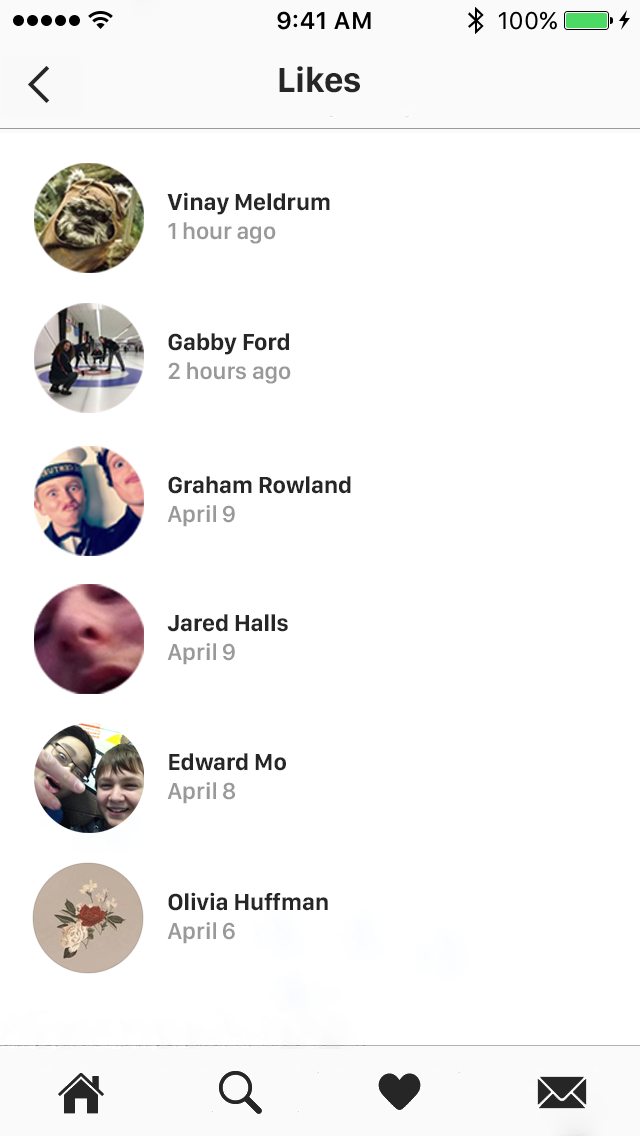
<style>
.page{position:relative;width:640px;height:1136px;background:#ffffff}
.page>*{position:absolute;margin:0}
.t1{font:36px "SanFranciscoDisplay-Bold";color:#262626}
.t2{font:24px "SanFranciscoDisplay-Bold";color:#262626}
.t3{font:24px "SanFranciscoDisplay-Semibold";color:#999999}
</style>
<div class="page">
<p class="t1" style="left:279px;top:66px;width:81px;height:27px">Likes</p>
<p class="t2" style="left:167px;top:192px;width:163px;height:52px">Vinay Meldrum<br><span class="t3">1 hour ago</span></p>
<p class="t3" style="left:168px;top:333px;width:123px;height:51px"><span class="t2">Gabby Ford<br></span>2 hours ago</p>
<p class="t2" style="left:167px;top:476px;width:184px;height:51px">Graham Rowland<br><span class="t3">April 9</span></p>
<p class="t2" style="left:167px;top:614px;width:121px;height:51px">Jared Halls<br><span class="t3">April 9</span></p>
<p class="t2" style="left:167px;top:753px;width:119px;height:51px">Edward Mo<br><span class="t3">April 8</span></p>
<p class="t2" style="left:167px;top:892px;width:161px;height:52px">Olivia Huffman<br><span class="t3">April 6</span></p>
</div>
